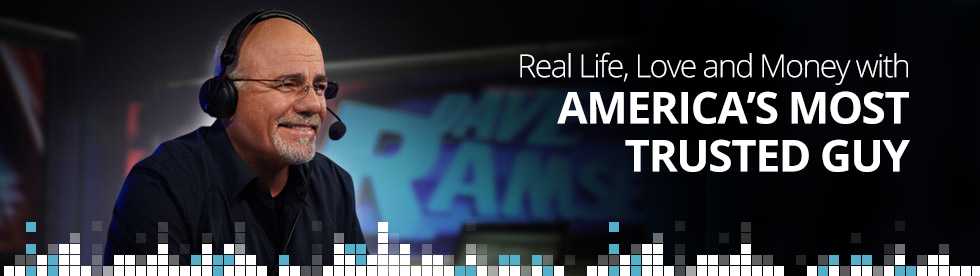
<style>
.page{position:relative;width:980px;height:276px}
.page>*{position:absolute;margin:0}
.t1{font:32px "OpenSans-Light";letter-spacing:-0.05em;color:#ffffff}
.t2{font:44px/48px "OpenSans-Bold";letter-spacing:-0.03em;color:#ffffff}
</style>
<div class="page">
<p class="t1" style="left:520px;top:52px;width:388px;height:33px">Real Life, Love and Money with</p>
<p class="t2" style="left:557px;top:91px;width:353px;height:81px;text-align:justify">AMERICA’S MOST<br>TRUSTED GUY</p>
</div>
